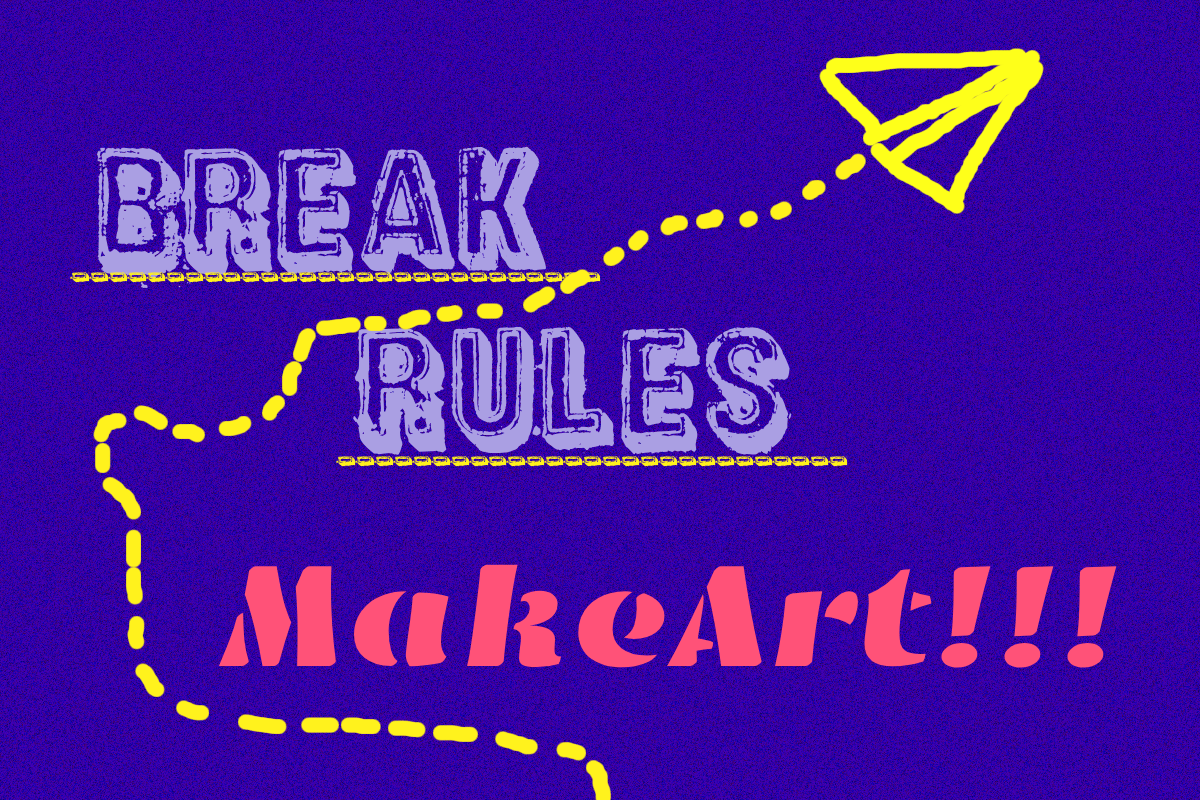
<style>
.page{position:relative;width:1200px;height:800px}
.page>*{position:absolute;margin:0}
.t1{font:150px "District";color:#aa9fe3}
.t2{font:35px "District";color:#fff21d}
</style>
<div class="page">
<p class="t1" style="left:96px;top:144px;width:696px;height:320px">Break <br>       rules</p>
<p class="t2" style="left:70px;top:272px;width:531px;height:11px">----------------------------</p>
</div>
